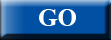
<style>
.page{position:relative;width:111px;height:40px;background:#0150a3}
.page>*{position:absolute;margin:0}
.t1{font:25px "TimesNewRomanPS-BoldMT";color:#ffffff}
</style>
<div class="page">
<p class="t1" style="left:39px;top:9px;width:37px;height:17px">GO</p>
</div>
